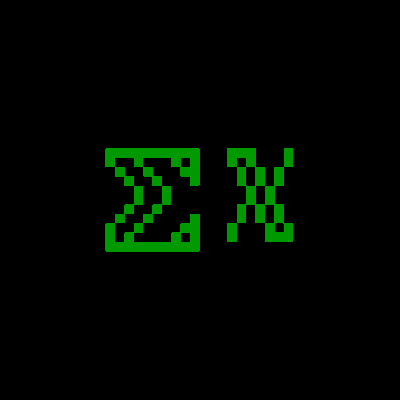
<style>
.page{position:relative;width:400px;height:400px;background:#000000}
.page>*{position:absolute;margin:0}
.t1{font:150px "UnifontExMono";color:#009900}
</style>
<div class="page">
<p class="t1" style="left:105px;top:148px;width:189px;height:104px">⅀𝕏</p>
</div>
